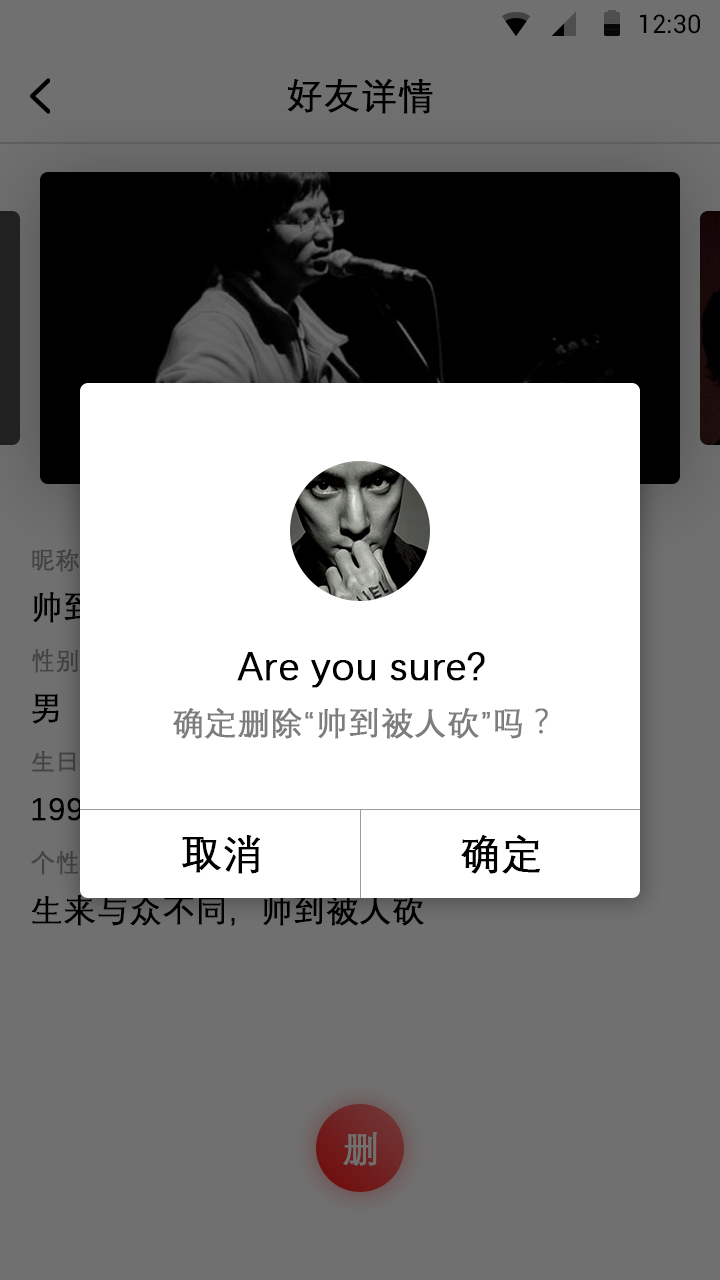
<style>
.page{position:relative;width:720px;height:1280px;background:#707070}
.page>*{position:absolute;margin:0}
.t1{font:25.4px "Roboto-Regular";color:#000000}
.t2{font:36px "DengXian-Regular";color:#000000;font-weight:bold}
.t3{font:24px "DengXian-Regular";color:#434343;font-weight:bold}
.t4{font:24px "DengXian-Regular";color:#424242;font-weight:bold}
.t5{font:40px "DengXian-Regular";color:#000000;font-weight:bold}
.t6{font:32px "DengXian-Regular";color:#000000;font-weight:bold}
.t7{font:32px "DengXian-Regular";color:#7d7d7d;font-weight:bold}
.t8{font:36px "DengXian-Regular";color:#707070;font-weight:bold}
</style>
<div class="page">
<p class="t1" style="left:640px;top:14px;width:60px;height:20px">12:30</p>
<p class="t2" style="left:287px;top:79px;width:146px;height:35px">好友详情</p>
<p class="t3" style="left:32px;top:549px;width:47px;height:23px">昵称</p>
<p class="t4" style="left:32px;top:649px;width:46px;height:24px">性别</p>
<p class="t5" style="left:237px;top:652px;width:248px;height:36px">Are you sure?</p>
<p class="t6" style="left:32px;top:694px;width:27px;height:30px">男</p>
<p class="t7" style="left:173px;top:708px;width:375px;height:31px">确定删除“帅到被人砍”吗？</p>
<p class="t4" style="left:32px;top:751px;width:44px;height:21px">生日</p>
<p class="t5" style="left:182px;top:835px;width:78px;height:39px">取消</p>
<p class="t5" style="left:461px;top:835px;width:79px;height:39px">确定</p>
<p class="t6" style="left:32px;top:895px;width:392px;height:31px">生来与众不同，帅到被人砍</p>
<p class="t8" style="left:343px;top:1132px;width:35px;height:34px">删</p>
</div>
